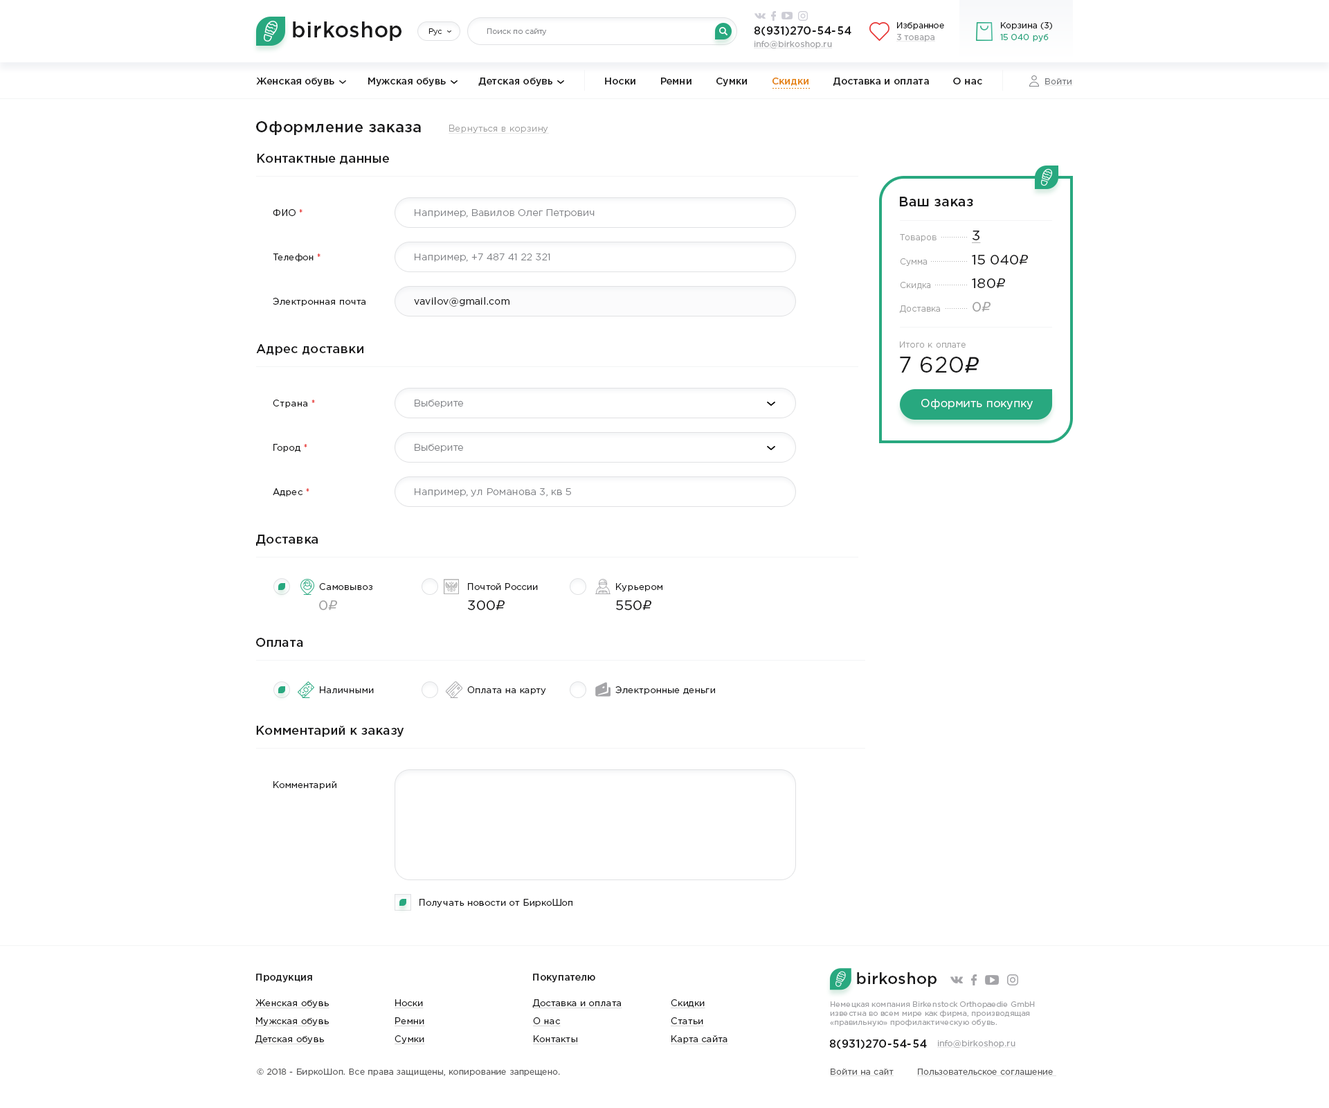
<style>
.page{position:relative;width:1329px;height:1108px;background:#ffffff}
.page>*{position:absolute;margin:0}
.t1{font:21.5px "GothamPro-Medium";letter-spacing:0.02em;color:#19191a}
.t2{font:7.6px "GothamPro-Light";letter-spacing:0.02em;color:#19191a}
.t3{font:7.6px "GothamPro-Light";letter-spacing:0.02em;color:#818387}
.t4{font:11.1px "GothamPro-Medium";letter-spacing:0.02em;color:#19191a}
.t5{font:8.3px "GothamPro";letter-spacing:0.02em;color:#19191a}
.t6{font:8.3px "GothamPro";letter-spacing:0.02em;color:#9fa0a3;text-decoration:underline}
.t7{font:8.3px "GothamPro";letter-spacing:0.02em;color:#28a57f}
.t8{font:9.7px "GothamPro-Medium";letter-spacing:0.02em;color:#19191a}
.t9{font:9.7px "GothamPro-Medium";letter-spacing:0.02em;color:#e4820d}
.t10{font:8.3px "GothamPro";letter-spacing:0.02em;color:#797b7f;text-decoration:underline}
.t11{font:15.2px "GothamPro-Medium";letter-spacing:0.02em;color:#19191a}
.t12{font:9px "GothamPro-Light";letter-spacing:0.02em;color:#a0a0a0;text-decoration:underline}
.t13{font:12.5px "GothamPro-Medium";letter-spacing:0.02em;color:#19191a}
.t14{font:13.8px "GothamPro-Medium";letter-spacing:0.02em;color:#19191a}
.t15{font:9px "GothamPro";letter-spacing:0.02em;color:#19191a}
.t16{font:9px "GothamPro";letter-spacing:0.02em;color:#e8413f}
.t17{font:9.7px "GothamPro-Light";letter-spacing:0.02em;color:#818387}
.t18{font:13.8px "GothamPro";letter-spacing:0.02em;color:#19191a;text-decoration:underline}
.t19{font:8.3px "GothamPro-Light";letter-spacing:0.02em;color:#a0a0a0}
.t20{font:13.8px "GothamPro";letter-spacing:0.02em;color:#19191a}
.t21{font:13.8px "ALSRubl";letter-spacing:0.02em;color:#19191a}
.t22{font:9.7px "GothamPro";letter-spacing:0.02em;color:#19191a}
.t23{font:13.8px "GothamPro";letter-spacing:0.02em;color:#a0a0a0}
.t24{font:13.8px "ALSRubl";letter-spacing:0.02em;color:#a0a0a0}
.t25{font:22.2px "GothamPro";letter-spacing:0.02em;color:#19191a}
.t26{font:22.2px "ALSRubl";letter-spacing:0.02em;color:#19191a}
.t27{font:11.1px "GothamPro";letter-spacing:0.02em;color:#ffffff}
.t28{font:15.9px "GothamPro-Medium";letter-spacing:0.02em;color:#19191a}
.t29{font:9px/18px "GothamPro";letter-spacing:0.02em;color:#19191a;text-decoration:underline}
.t30{font:7.6px "GothamPro";letter-spacing:0.02em;color:#9fa0a3}
.t31{font:8.3px "GothamPro";letter-spacing:0.02em;color:#5f5f60}
.t32{font:8.3px "GothamPro";letter-spacing:0.02em;color:#5f5f60;text-decoration:underline}
</style>
<div class="page">
<p class="t1" style="left:293px;top:21px;width:109px;height:20px">birkoshop</p>
<p class="t2" style="left:429px;top:28px;width:13px;height:7px">Рус</p>
<p class="t3" style="left:487px;top:28px;width:59px;height:7px">Поиск по сайту</p>
<p class="t4" style="left:754px;top:26px;width:98px;height:10px">8(931)270-54-54</p>
<p class="t5" style="left:897px;top:22px;width:47px;height:8px">Избранное</p>
<p class="t5" style="left:1001px;top:22px;width:51px;height:8px">Корзина (3)</p>
<p class="t6" style="left:754px;top:41px;width:79px;height:7px">info@birkoshop.ru</p>
<p class="t6" style="left:897px;top:34px;width:38px;height:8px">3 товара</p>
<p class="t7" style="left:1000px;top:34px;width:49px;height:8px">15 040 руб</p>
<p class="t8" style="left:256px;top:78px;width:296px;height:9px">Женская обувь           Мужская обувь           Детская обувь</p>
<p class="t8" style="left:605px;top:78px;width:377px;height:9px">Носки        Ремни        Сумки        <span class="t9">Скидки</span>        Доставка и оплата        О нас</p>
<p class="t10" style="left:1045px;top:78px;width:28px;height:8px">Войти</p>
<p class="t11" style="left:256px;top:121px;width:165px;height:14px">Оформление заказа</p>
<p class="t12" style="left:449px;top:125px;width:100px;height:9px">Вернуться в корзину</p>
<p class="t13" style="left:257px;top:154px;width:132px;height:11px">Контактные данные</p>
<p class="t14" style="left:900px;top:197px;width:73px;height:9px">Ваш заказ</p>
<p class="t15" style="left:273px;top:209px;width:30px;height:7px">ФИО <span class="t16">*</span></p>
<p class="t17" style="left:415px;top:209px;width:180px;height:8px">Например, Вавилов Олег Петрович</p>
<p class="t18" style="left:972px;top:231px;width:9px;height:12px">3</p>
<p class="t19" style="left:900px;top:234px;width:37px;height:8px">Товаров</p>
<p class="t15" style="left:273px;top:253px;width:48px;height:9px">Телефон <span class="t16">*</span></p>
<p class="t17" style="left:415px;top:253px;width:135px;height:9px">Например, +7 487 41 22 321</p>
<p class="t20" style="left:972px;top:255px;width:56px;height:9px">15 040<span class="t21">r</span></p>
<p class="t19" style="left:900px;top:258px;width:28px;height:8px">Сумма</p>
<p class="t19" style="left:900px;top:282px;width:31px;height:7px">Скидка</p>
<p class="t20" style="left:972px;top:278px;width:33px;height:10px">180<span class="t21">r</span></p>
<p class="t15" style="left:273px;top:298px;width:93px;height:8px">Электронная почта</p>
<p class="t22" style="left:414px;top:297px;width:96px;height:10px">vavilov@gmail.com</p>
<p class="t19" style="left:899px;top:305px;width:41px;height:8px">Доставка</p>
<p class="t23" style="left:973px;top:302px;width:18px;height:10px">0<span class="t24">r</span></p>
<p class="t19" style="left:900px;top:341px;width:66px;height:7px">Итого к оплате</p>
<p class="t13" style="left:256px;top:344px;width:107px;height:11px">Адрес доставки</p>
<p class="t25" style="left:900px;top:357px;width:79px;height:15px">7 620<span class="t26">r</span></p>
<p class="t15" style="left:273px;top:399px;width:42px;height:9px">Страна <span class="t16">*</span></p>
<p class="t17" style="left:415px;top:399px;width:48px;height:9px">Выберите</p>
<p class="t27" style="left:921px;top:399px;width:112px;height:10px">Оформить покупку</p>
<p class="t15" style="left:273px;top:444px;width:34px;height:8px">Город <span class="t16">*</span></p>
<p class="t17" style="left:415px;top:444px;width:48px;height:8px">Выберите</p>
<p class="t15" style="left:273px;top:488px;width:36px;height:8px">Адрес <span class="t16">*</span></p>
<p class="t17" style="left:415px;top:488px;width:156px;height:8px">Например, ул Романова 3, кв 5</p>
<p class="t13" style="left:256px;top:534px;width:62px;height:12px">Доставка</p>
<p class="t15" style="left:319px;top:583px;width:53px;height:7px">Самовывоз</p>
<p class="t15" style="left:468px;top:583px;width:70px;height:7px">Почтой России</p>
<p class="t15" style="left:616px;top:583px;width:47px;height:9px">Курьером</p>
<p class="t23" style="left:319px;top:600px;width:18px;height:10px">0<span class="t24">r</span></p>
<p class="t20" style="left:468px;top:600px;width:37px;height:10px">300<span class="t21">r</span></p>
<p class="t20" style="left:616px;top:600px;width:35px;height:10px">550<span class="t21">r</span></p>
<p class="t13" style="left:256px;top:638px;width:47px;height:9px">Оплата</p>
<p class="t15" style="left:320px;top:686px;width:54px;height:7px">Наличными</p>
<p class="t15" style="left:467px;top:686px;width:79px;height:9px">Оплата на карту</p>
<p class="t15" style="left:615px;top:686px;width:100px;height:8px">Электронные деньги</p>
<p class="t13" style="left:256px;top:726px;width:148px;height:11px">Комментарий к заказу</p>
<p class="t15" style="left:273px;top:781px;width:63px;height:8px">Комментарий</p>
<p class="t15" style="left:420px;top:899px;width:153px;height:9px">Получать новости от БиркоШоп</p>
<p class="t8" style="left:256px;top:973px;width:56px;height:9px">Продукция</p>
<p class="t8" style="left:533px;top:973px;width:62px;height:9px">Покупателю</p>
<p class="t28" style="left:857px;top:972px;width:80px;height:15px">birkoshop</p>
<p class="t29" style="left:255px;top:999px;width:75px;height:45px">Женская обувь<br>Мужская обувь<br>Детская обувь</p>
<p class="t29" style="left:395px;top:999px;width:30px;height:45px">Носки<br>Ремни<br>Сумки</p>
<p class="t29" style="left:532px;top:999px;width:90px;height:45px">Доставка и оплата<br>О нас<br>Контакты</p>
<p class="t29" style="left:671px;top:999px;width:57px;height:45px">Скидки<br>Статьи<br>Карта сайта</p>
<p class="t30" style="left:830px;top:1001px;width:205px;height:25px">Немецкая компания Birkenstock Orthopaedie GmbH известна во всем мире как фирма, производящая «правильную» профилактическую обувь.</p>
<p class="t4" style="left:829px;top:1039px;width:98px;height:10px">8(931)270-54-54</p>
<p class="t6" style="left:937px;top:1040px;width:79px;height:7px">info@birkoshop.ru</p>
<p class="t31" style="left:257px;top:1068px;width:303px;height:8px">© 2018 - БиркоШоп. Все права защищены, копирование запрещено.</p>
<p class="t32" style="left:830px;top:1068px;width:226px;height:8px">Войти на сайт        Пользовательское соглашение</p>
</div>
